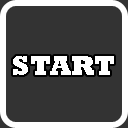
<style>
.page{position:relative;width:128px;height:128px;background:#333333}
.page>*{position:absolute;margin:0}
.t1{font:28px "Rockwell-ExtraBold";color:#ffffff}
</style>
<div class="page">
<p class="t1" style="left:13px;top:56px;width:101px;height:19px">START</p>
</div>
